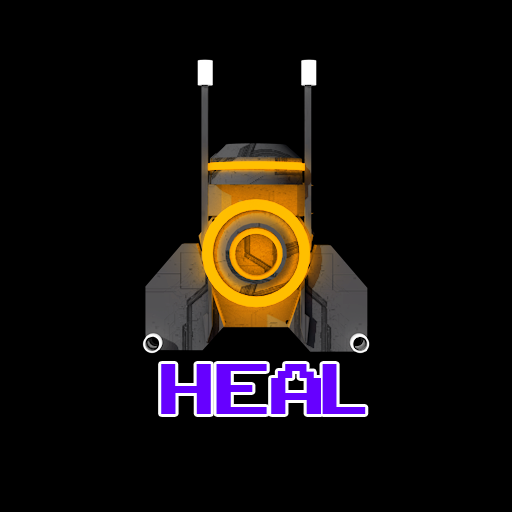
<style>
.page{position:relative;width:512px;height:512px;background:#000000}
.page>*{position:absolute;margin:0}
.t1{font:100px "ArcadeClassic";color:#6600ff}
</style>
<div class="page">
<p class="t1" style="left:161px;top:364px;width:205px;height:50px">Heal</p>
</div>
